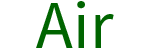
<style>
.page{position:relative;width:150px;height:50px;background:#ffffff}
.page>*{position:absolute;margin:0}
.t1{font:68px "SourceSansPro-Regular";color:#006400}
</style>
<div class="page">
<p class="t1" style="left:36px;top:1px;width:78px;height:47px">Air</p>
</div>
